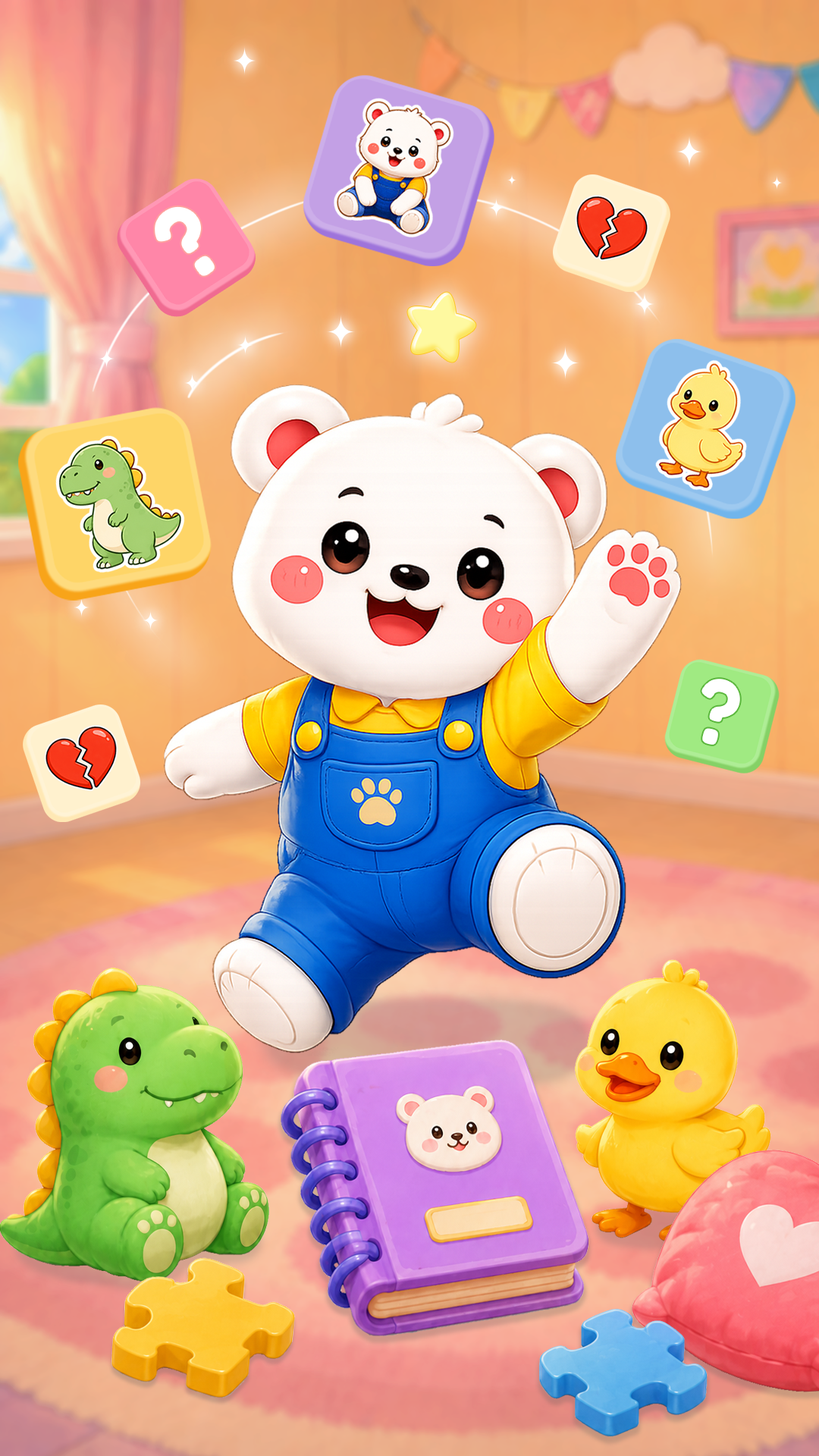
<style>
.page{position:relative;width:819px;height:1456px}
.page>*{position:absolute;margin:0}
.t1{font:103.7px "FredokaOne-Regular";color:#ffffff;scale:0.97 1}
.t2{font:90.2px "FredokaOne-Regular";color:#ffffff;scale:0.97 1}
</style>
<div class="page">
<p class="t1" style="left:154px;top:206px;width:61px;height:71px;rotate:-35deg">?</p>
<p class="t2" style="left:701px;top:678px;width:40px;height:67px;rotate:16deg">?</p>
</div>
